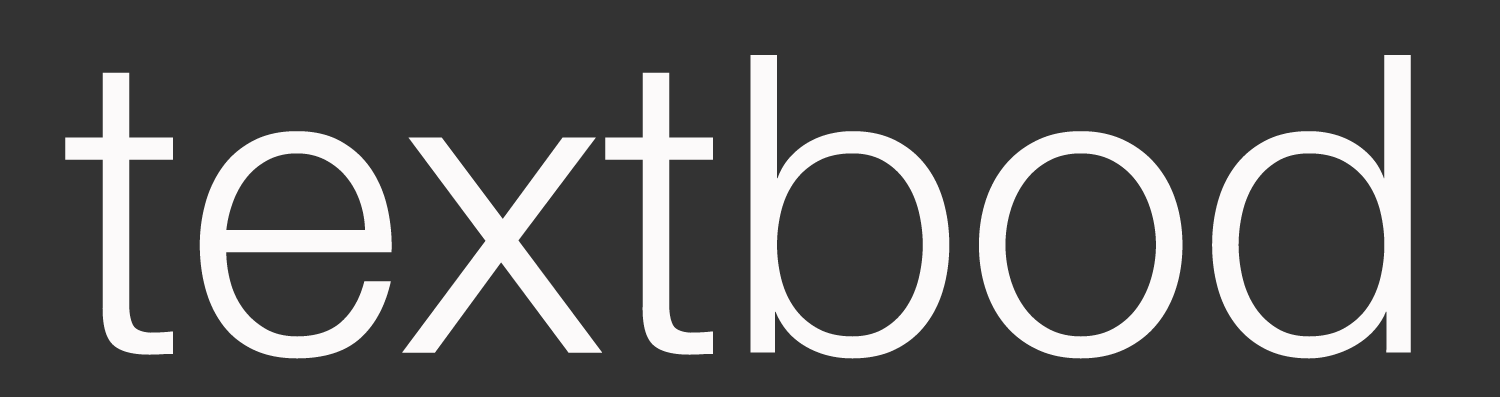
<style>
.page{position:relative;width:1500px;height:397px;background:#333333}
.page>*{position:absolute;margin:0}
.t1{font:416.7px "HelveticaNeue-Light";color:#fcfafa}
</style>
<div class="page">
<p class="t1" style="left:65px;top:55px;width:1346px;height:304px">textbod</p>
</div>
